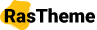
<style>
.page{position:relative;width:97px;height:30px;background:#ffffff}
.page>*{position:absolute;margin:0}
.t1{font:18.9px "Roboto-Black";color:#000000}
</style>
<div class="page">
<p class="t1" style="left:4px;top:8px;width:91px;height:15px">RasTheme</p>
</div>
